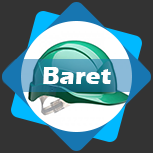
<style>
.page{position:relative;width:153px;height:153px;background:#333333}
.page>*{position:absolute;margin:0}
.t1{font:25px "ErasITC-Bold";color:#ffffff}
</style>
<div class="page">
<p class="t1" style="left:43px;top:67px;width:68px;height:17px">Baret</p>
</div>
